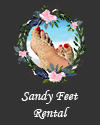
<style>
.page{position:relative;width:100px;height:125px;background:#333333}
.page>*{position:absolute;margin:0}
.t1{font:14px "MonotypeCorsiva";color:#ffffff}
</style>
<div class="page">
<p class="t1" style="left:21px;top:90px;width:57px;height:29px;text-align:center">Sandy Feet<br>Rental</p>
</div>
